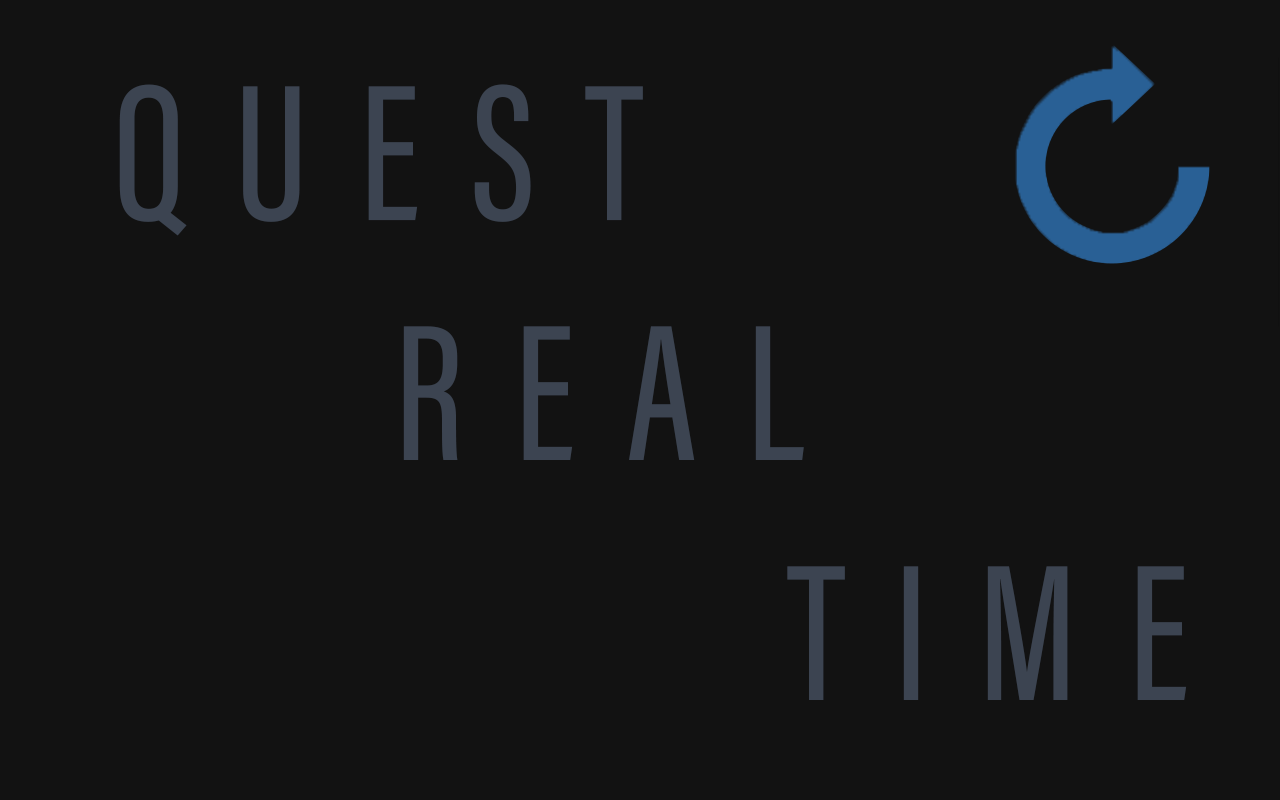
<style>
.page{position:relative;width:1280px;height:800px;background:#121212}
.page>*{position:absolute;margin:0}
.t1{font:200px "AcuminConcept-ExtraCondensedMedium";letter-spacing:0.25em;color:#3c4451}
</style>
<div class="page">
<p class="t1" style="left:119px;top:84px;width:1068px;height:616px">QUEST<br>       REAL                      TIME</p>
</div>
